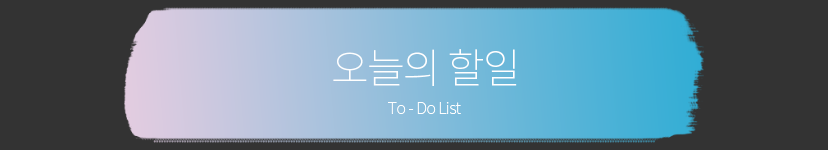
<style>
.page{position:relative;width:828px;height:150px;background:#333333}
.page>*{position:absolute;margin:0}
.t1{font:41px "NotoSansCJKkr-Thin";letter-spacing:-0.04em;color:#ffffff}
.t2{font:16.4px "NotoSansCJKkr-Thin";letter-spacing:-0.04em;color:#ffffff}
</style>
<div class="page">
<p class="t1" style="left:333px;top:49px;width:184px;height:37px">오늘의 할일</p>
<p class="t2" style="left:388px;top:102px;width:73px;height:12px">To - Do List</p>
</div>
